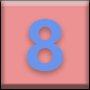
<style>
.page{position:relative;width:90px;height:90px;background:#ed9292}
.page>*{position:absolute;margin:0}
.t1{font:66.7px "MicrosoftYaHei-Bold";color:#6b95ea}
</style>
<div class="page">
<p class="t1" style="left:27px;top:19px;width:36px;height:52px">8</p>
</div>
